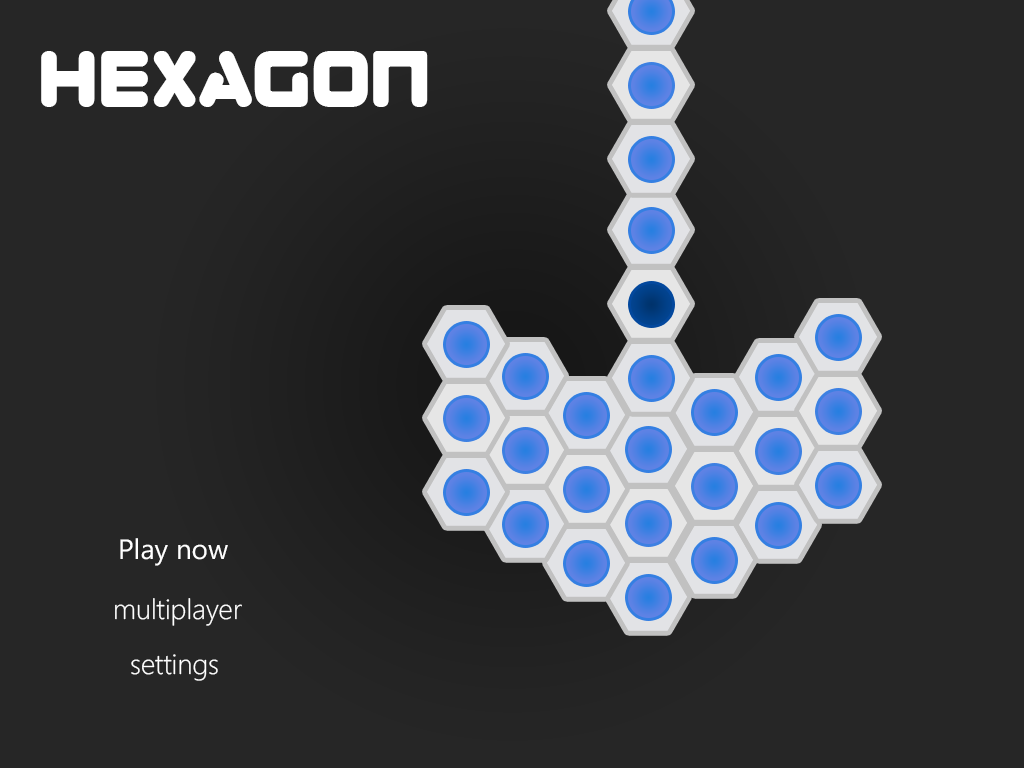
<style>
.page{position:relative;width:1024px;height:768px;background:#262626}
.page>*{position:absolute;margin:0}
.t1{font:80px "Zorque-Regular";color:#ffffff}
.t2{font:28px "SegoeWP";color:#ffffff}
.t3{font:28px "SegoeWP-Light";color:#ffffff}
</style>
<div class="page">
<p class="t1" style="left:41px;top:51px;width:387px;height:56px">Hexagon</p>
<p class="t2" style="left:120px;top:538px;width:108px;height:28px">Play now</p>
<p class="t3" style="left:115px;top:598px;width:127px;height:28px">multiplayer</p>
<p class="t3" style="left:131px;top:654px;width:87px;height:27px">settings</p>
</div>
